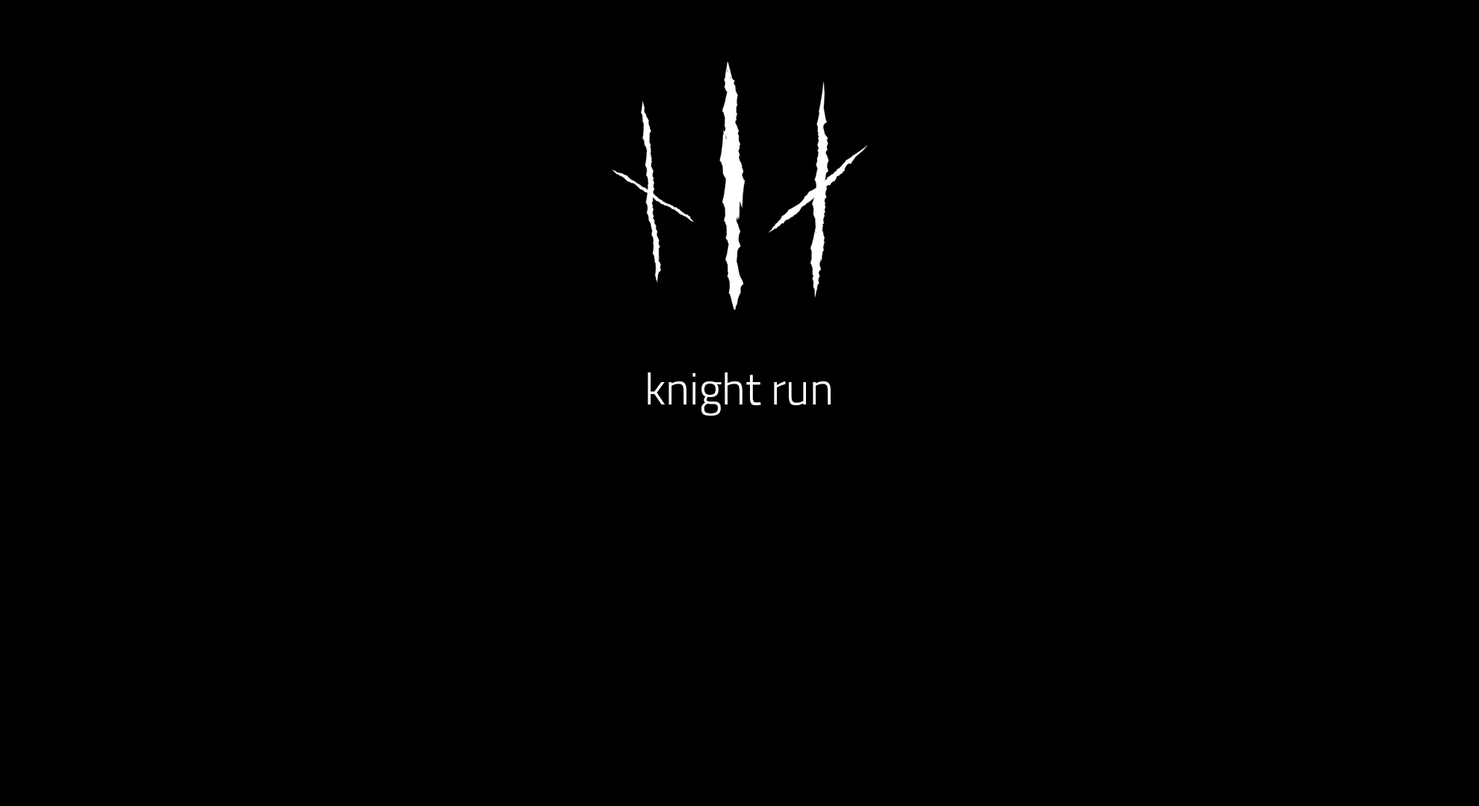
<style>
.page{position:relative;width:1479px;height:806px;background:#000000}
.page>*{position:absolute;margin:0}
.t1{font:44.8px "Titillium-Light";color:#ffffff}
</style>
<div class="page">
<p class="t1" style="left:647px;top:373px;width:183px;height:43px">knight run</p>
</div>
